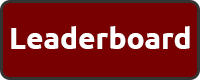
<style>
.page{position:relative;width:200px;height:80px;background:#790000}
.page>*{position:absolute;margin:0}
.t1{font:30px "Ubuntu-Bold";color:#ffffff}
</style>
<div class="page">
<p class="t1" style="left:11px;top:26px;width:179px;height:23px">Leaderboard</p>
</div>
